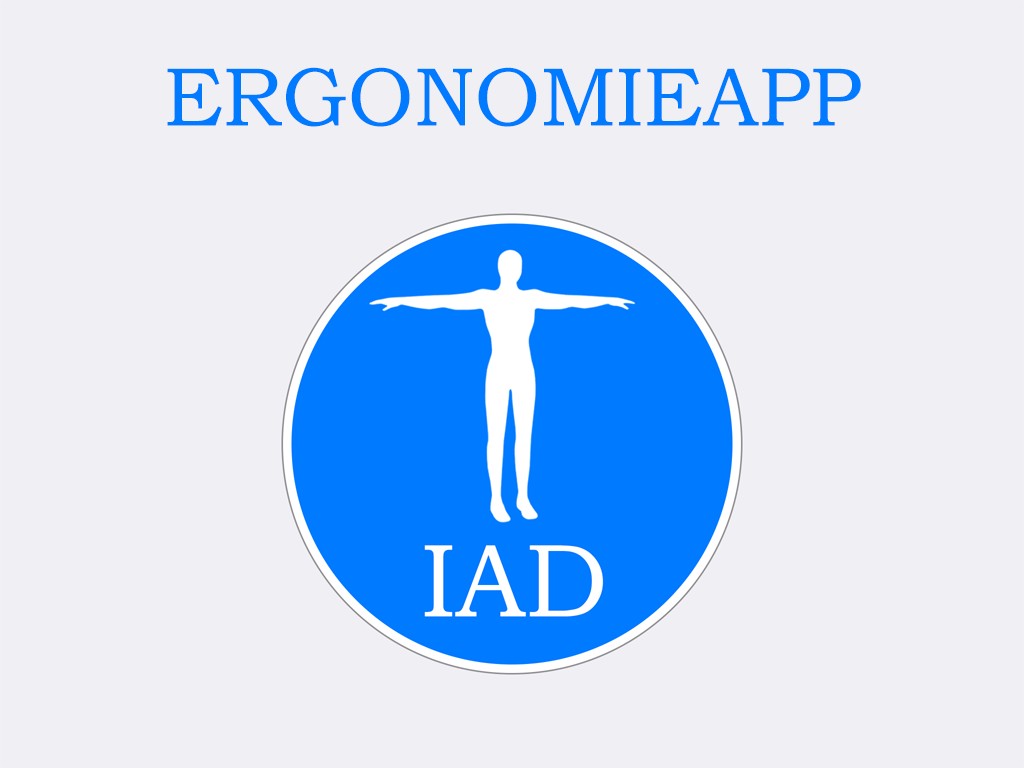
<style>
.page{position:relative;width:1024px;height:768px;background:#efeff4}
.page>*{position:absolute;margin:0}
.t1{font:83.3px "BookmanOldStyle";letter-spacing:-0.01em;color:#007aff}
</style>
<div class="page">
<p class="t1" style="left:167px;top:67px;width:694px;height:60px">ERGONOMIEAPP</p>
</div>
